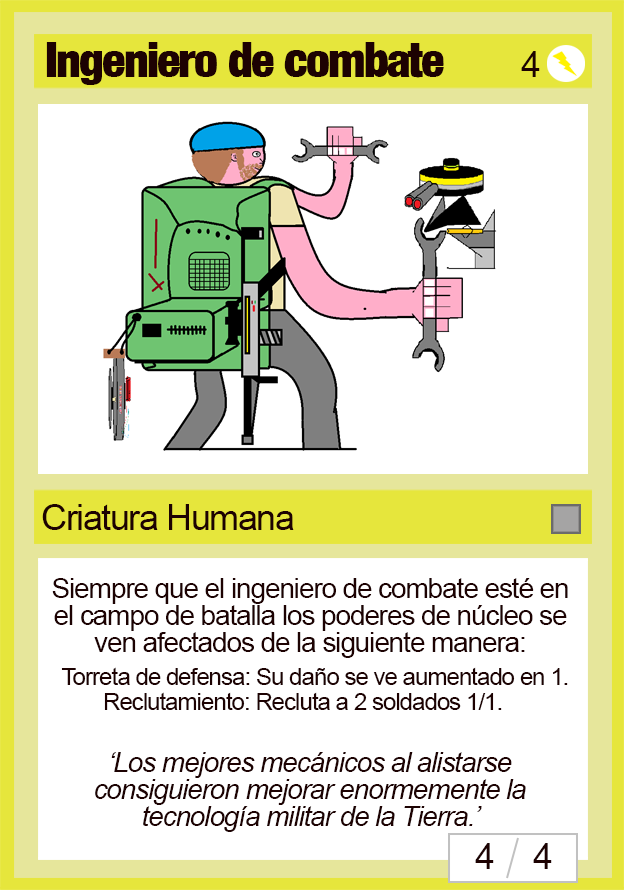
<style>
.page{position:relative;width:624px;height:890px;background:#ffffff}
.page>*{position:absolute;margin:0}
.t1{font:48px "Harvest";letter-spacing:-0.04em;color:#1d0202}
.t2{font:36px "ArialMT";letter-spacing:-0.04em;color:#1d0202}
.t3{font:28px/27px "ArialMT";letter-spacing:-0.04em;color:#1d0202}
.t4{font:24px "ArialMT";letter-spacing:-0.04em;color:#1d0202}
.t5{font:28px/27px "Arial-ItalicMT";letter-spacing:-0.04em;color:#1d0202}
</style>
<div class="page">
<p class="t1" style="left:46px;top:42px;width:398px;height:43px">Ingeniero de combate</p>
<p class="t2" style="left:521px;top:51px;width:19px;height:26px">4</p>
<p class="t2" style="left:42px;top:504px;width:252px;height:26px">Criatura Humana</p>
<p class="t3" style="left:52px;top:578px;width:516px;height:80px;text-align:center">Siempre que el ingeniero de combate esté en<br>el campo de batalla los poderes de núcleo se<br>ven afectados de la siguiente manera:</p>
<p class="t4" style="left:61px;top:667px;width:507px;height:18px">Torreta de defensa: Su daño se ve aumentado en 1.</p>
<p class="t4" style="left:104px;top:692px;width:398px;height:18px">Reclutamiento: Recluta a 2 soldados 1/1.</p>
<p class="t5" style="left:95px;top:752px;width:431px;height:80px;text-align:center">‘Los mejores mecánicos al alistarse consiguieron mejorar enormemente la tecnología militar de la Tierra.’</p>
<p class="t2" style="left:475px;top:843px;width:19px;height:26px">4</p>
<p class="t2" style="left:533px;top:843px;width:19px;height:26px">4</p>
</div>
